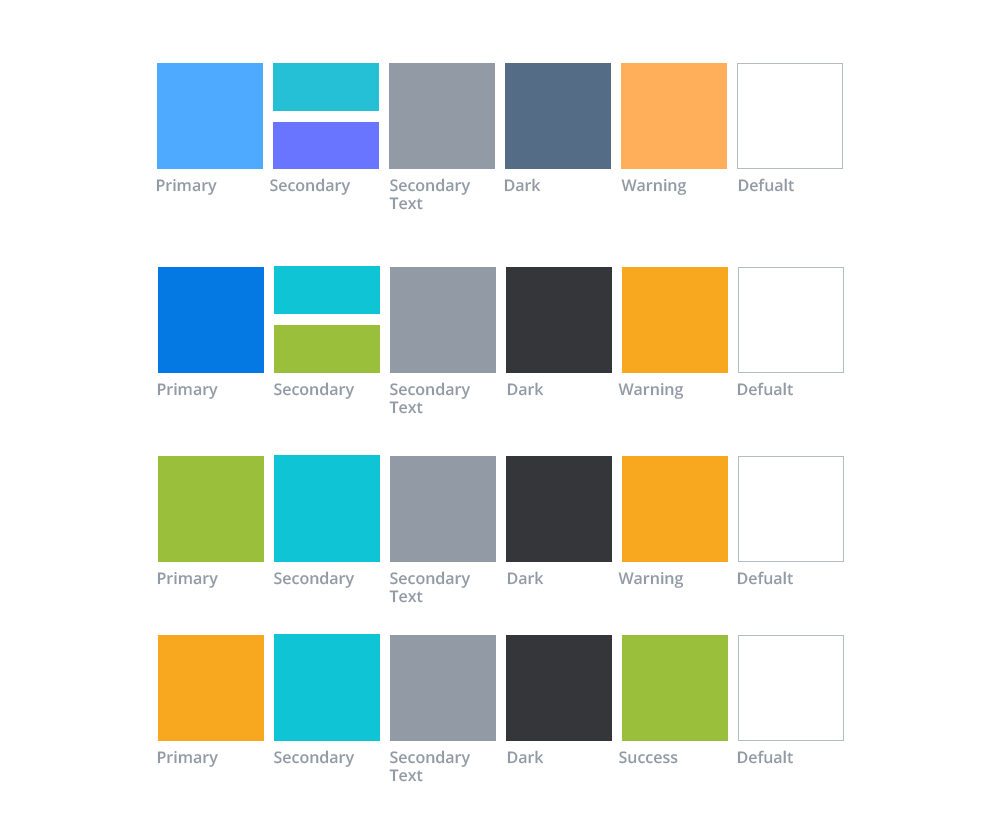
<style>
.page{position:relative;width:1000px;height:827px;background:#ffffff}
.page>*{position:absolute;margin:0}
.t1{font:16px "OpenSans-Semibold";color:#919aa5}
.t2{font:16px/18.5px "OpenSans-Semibold";color:#919aa5}
</style>
<div class="page">
<p class="t1" style="left:156px;top:178px;width:61px;height:17px">Primary</p>
<p class="t1" style="left:270px;top:178px;width:80px;height:17px">Secondary</p>
<p class="t2" style="left:389px;top:178px;width:81px;height:32px">Secondary<br>Text</p>
<p class="t1" style="left:504px;top:178px;width:37px;height:14px">Dark</p>
<p class="t1" style="left:621px;top:179px;width:66px;height:16px">Warning</p>
<p class="t1" style="left:738px;top:178px;width:56px;height:14px">Defualt</p>
<p class="t1" style="left:157px;top:382px;width:61px;height:17px">Primary</p>
<p class="t1" style="left:274px;top:382px;width:80px;height:17px">Secondary</p>
<p class="t2" style="left:389px;top:382px;width:81px;height:32px">Secondary<br>Text</p>
<p class="t1" style="left:507px;top:382px;width:37px;height:14px">Dark</p>
<p class="t1" style="left:618px;top:383px;width:66px;height:16px">Warning</p>
<p class="t1" style="left:737px;top:382px;width:56px;height:14px">Defualt</p>
<p class="t1" style="left:157px;top:571px;width:61px;height:17px">Primary</p>
<p class="t1" style="left:274px;top:571px;width:80px;height:17px">Secondary</p>
<p class="t2" style="left:389px;top:571px;width:81px;height:32px">Secondary<br>Text</p>
<p class="t1" style="left:507px;top:571px;width:37px;height:14px">Dark</p>
<p class="t1" style="left:618px;top:572px;width:66px;height:16px">Warning</p>
<p class="t1" style="left:737px;top:571px;width:56px;height:14px">Defualt</p>
<p class="t1" style="left:157px;top:750px;width:61px;height:17px">Primary</p>
<p class="t1" style="left:274px;top:750px;width:80px;height:17px">Secondary</p>
<p class="t2" style="left:389px;top:750px;width:81px;height:32px">Secondary<br>Text</p>
<p class="t1" style="left:507px;top:750px;width:37px;height:14px">Dark</p>
<p class="t1" style="left:737px;top:750px;width:56px;height:14px">Defualt</p>
<p class="t1" style="left:619px;top:751px;width:59px;height:13px">Success</p>
</div>
